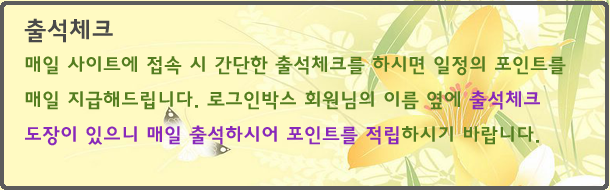
<style>
.page{position:relative;width:610px;height:190px;background:#fffac2}
.page>*{position:absolute;margin:0}
.t1{font:25px "HaanYGodic24";color:#494949}
.t2{font:20px "HaanYGodic24";color:#547d20}
.t3{font:20px "HaanYGodic24";color:#8829ba}
</style>
<div class="page">
<p class="t1" style="left:24px;top:18px;width:89px;height:25px">출석체크</p>
<p class="t2" style="left:25px;top:55px;width:541px;height:91px">매일 사이트에 접속 시 간단한 출석체크를 하시면 일정의 포인트를 매일 지급해드립니다. 로그인박스 회원님의 이름 옆에 <span class="t3">출석체크 도장이 있으니 매일 출석하시어 포인트를 적립</span>하시기 바랍니다.</p>
</div>
